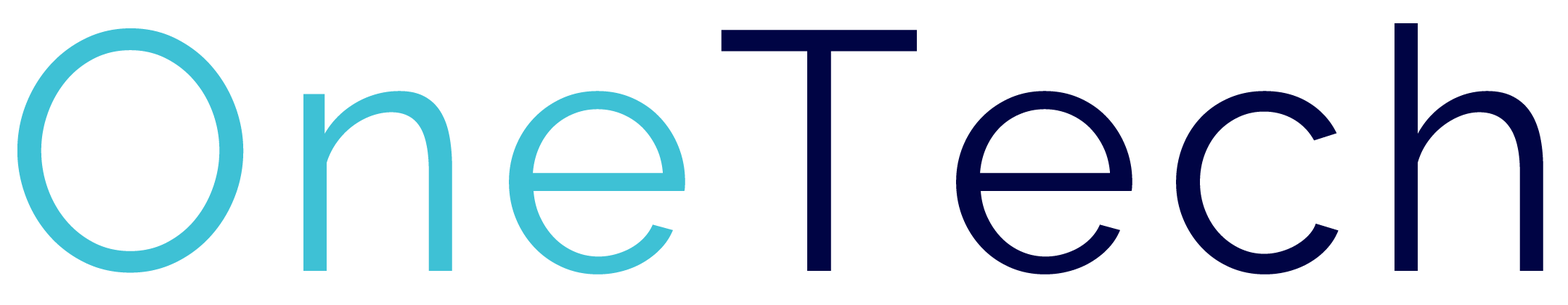
<style>
.page{position:relative;width:1568px;height:305px;background:#ffffff}
.page>*{position:absolute;margin:0}
.t1{font:339px "Raleway";letter-spacing:0.06em;color:#000444}
.t2{font:339px "Raleway";letter-spacing:0.06em;color:#3ec1d5}
</style>
<div class="page">
<p class="t1" style="left:17px;top:23px;width:1526px;height:251px"><span class="t2">One</span>Tech</p>
</div>
